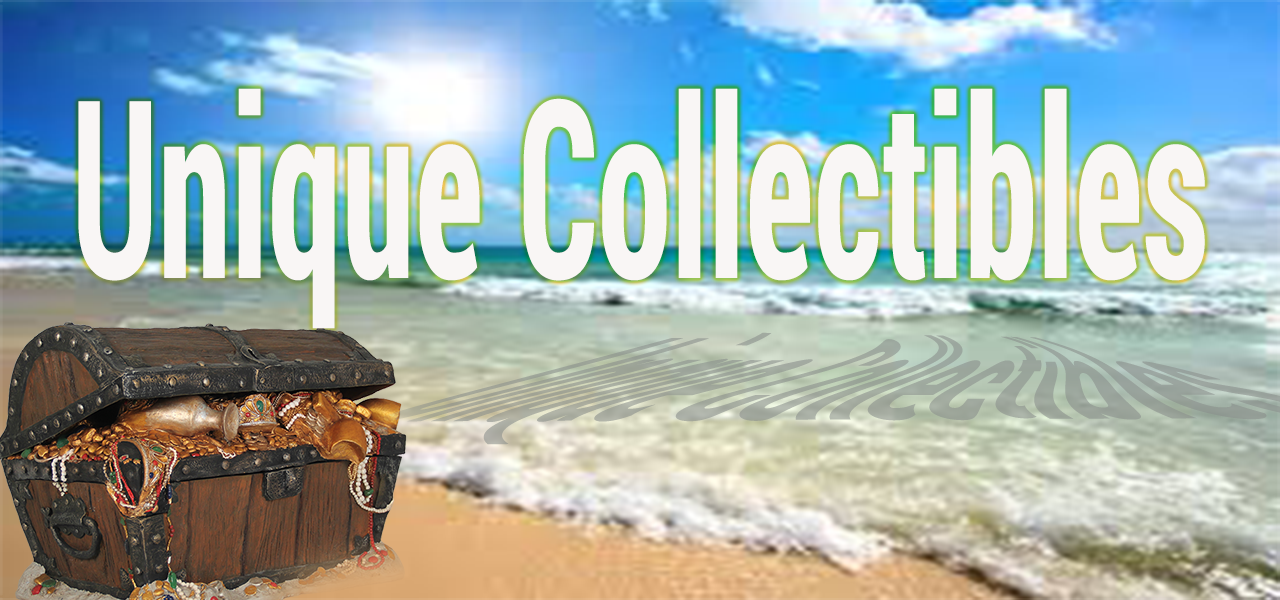
<style>
.page{position:relative;width:1280px;height:600px}
.page>*{position:absolute;margin:0}
.t1{font:247.9px "RobotoCondensed-Bold";color:#f9f6f5;scale:0.63 1}
</style>
<div class="page">
<p class="t1" style="left:78px;top:88px;width:1127px;height:241px">Unique Collectibles</p>
</div>
